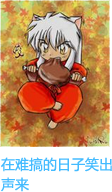
<style>
.page{position:relative;width:112px;height:192px}
.page>*{position:absolute;margin:0}
.t1{font:14px/20px "MicrosoftYaHei";color:#44bbff}
</style>
<div class="page">
<p class="t1" style="left:1px;top:157px;width:111px;height:35px">在难搞的日子笑出<br>声来</p>
</div>
